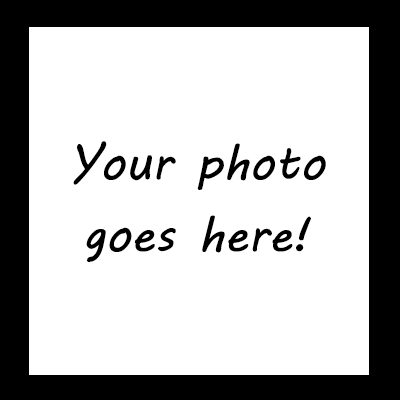
<style>
.page{position:relative;width:400px;height:400px;background:#ffffff}
.page>*{position:absolute;margin:0}
.t1{font:48px/36px "MVBoli";color:#000000}
</style>
<div class="page">
<p class="t1" style="left:73px;top:141px;width:253px;height:121px;text-align:center">Your photo<br><br>goes here!</p>
</div>
